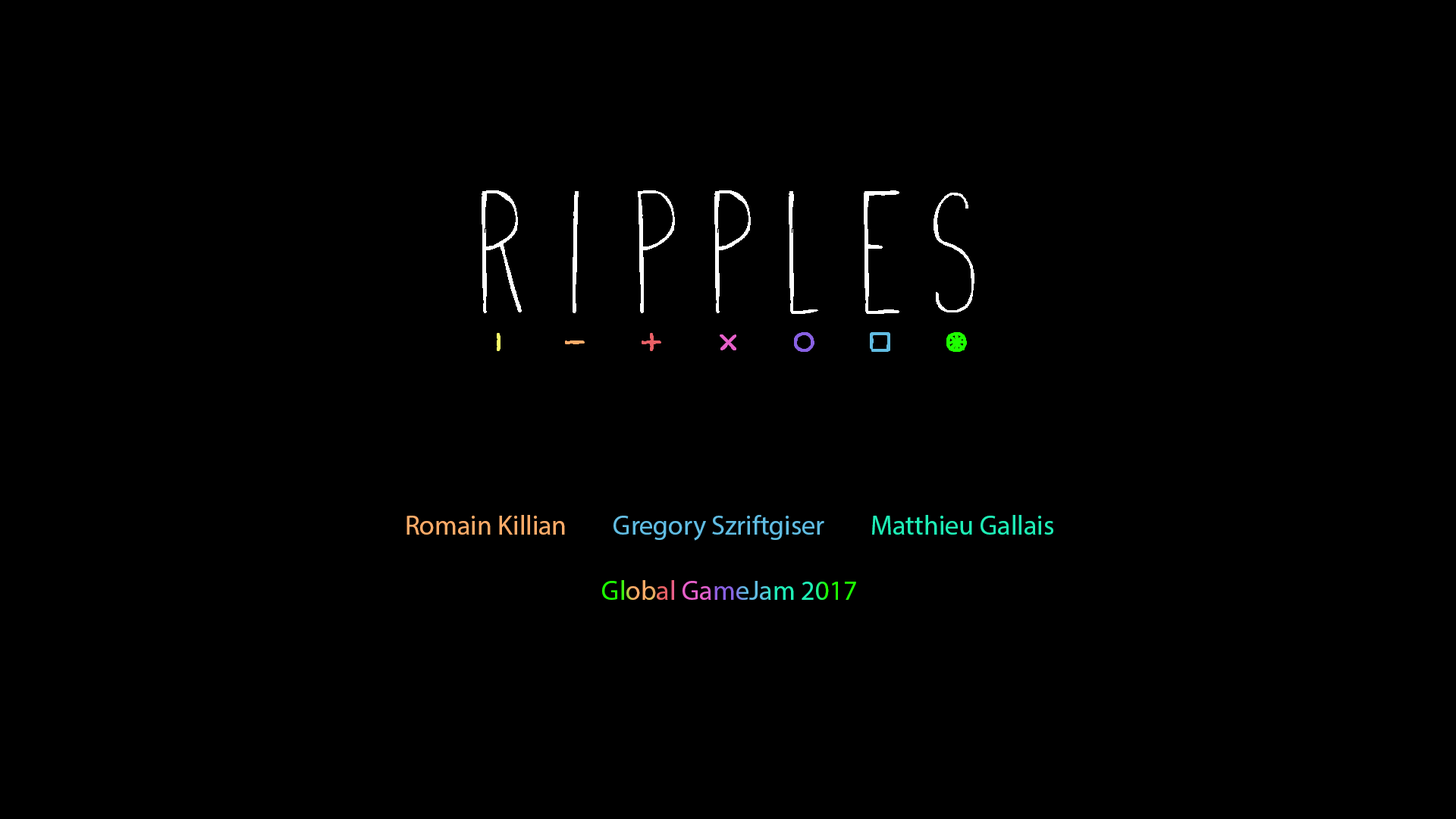
<style>
.page{position:relative;width:1456px;height:819px;background:#000000}
.page>*{position:absolute;margin:0}
.t1{font:27.3px "MyriadPro-Regular"}
</style>
<div class="page">
<p class="t1" style="left:406px;top:515px;width:647px;height:85px;text-align:center">Romain Killian        Gregory Szriftgiser        Matthieu Gallais<br><br>Global GameJam 2017</p>
</div>
